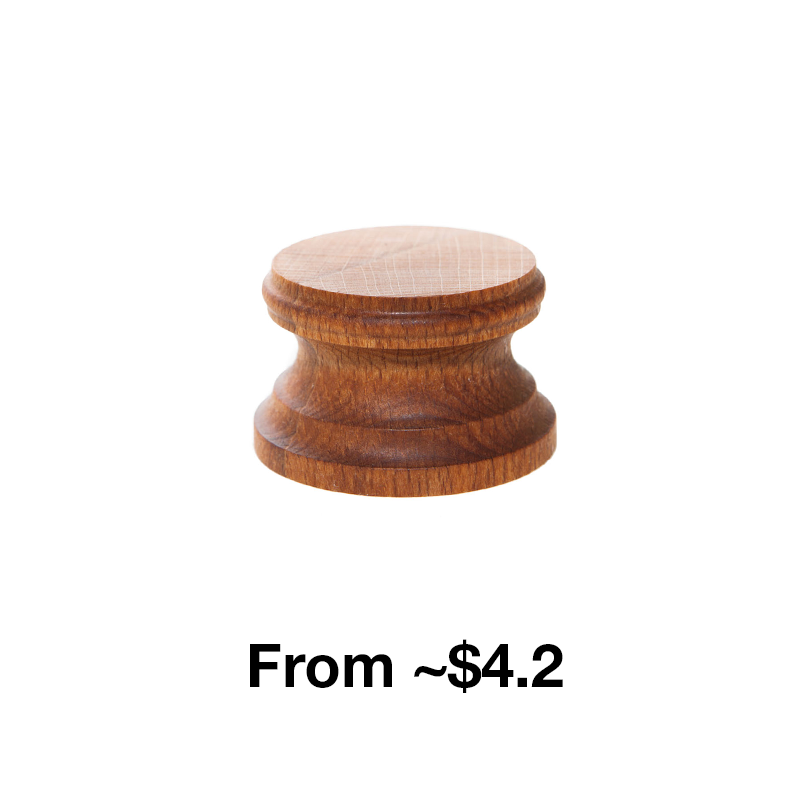
<style>
.page{position:relative;width:800px;height:800px;background:#ffffff}
.page>*{position:absolute;margin:0}
.t1{font:60px "HelveticaNeueCyr-Bold";color:#000000}
</style>
<div class="page">
<p class="t1" style="left:250px;top:639px;width:313px;height:54px">From ~$4.2</p>
</div>
